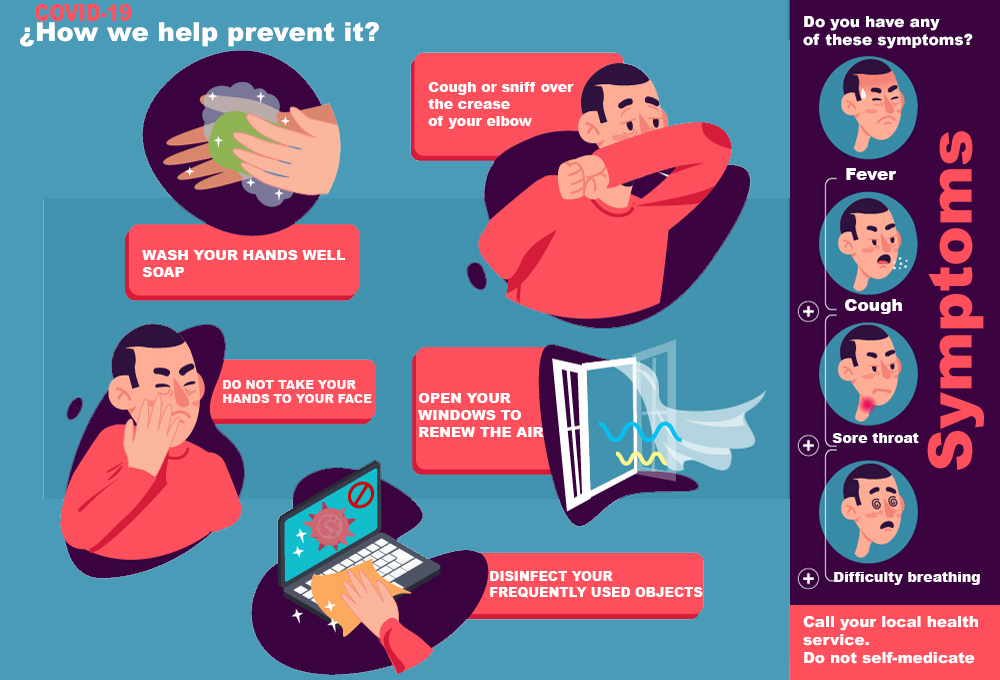
<style>
.page{position:relative;width:1000px;height:680px;background:#4a9bb8}
.page>*{position:absolute;margin:0}
.t1{font:23.1px "Arial-Black";color:#fe4f5c;scale:0.81 1}
.t2{font:15.4px "Arial-Black";color:#ffffff}
.t3{font:26.4px "Arial-Black";color:#ffffff}
.t4{font:14px "Arial-Black";color:#ffffff}
.t5{font:14px "Arial-Black";color:#fe4f5c}
.t6{font:60.1px "Arial-Black";color:#fe4f5c}
.t7{font:17px "Arial-Black";color:#ffffff}
.t8{font:12px "Arial-Black";color:#fcf6f7}
.t9{font:13px "Arial-Black";color:#ffffff}
.t10{font:15.1px "Arial-Black";color:#ffffff}
</style>
<div class="page">
<p class="t1" style="left:35px;top:4px;width:97px;height:17px">COVID-19</p>
<p class="t2" style="left:803px;top:16px;width:170px;height:33px">Do you have any <br>of these symptoms?</p>
<p class="t3" style="left:20px;top:22px;width:359px;height:25px">¿How we help prevent it?</p>
<p class="t4" style="left:428px;top:82px;width:146px;height:47px"><span class="t5"><br></span>Cough or sniff over<br>the crease <br>of your elbow</p>
<p class="t6" style="left:927px;top:131px;width:57px;height:339px;rotate:-90deg">Symptoms</p>
<p class="t7" style="left:846px;top:168px;width:51px;height:12px">Fever</p>
<p class="t4" style="left:142px;top:250px;width:203px;height:27px"><span class="t5"><br></span>WASH YOUR HANDS WELL <br>SOAP</p>
<p class="t7" style="left:845px;top:299px;width:57px;height:15px">Cough</p>
<p class="t8" style="left:223px;top:380px;width:149px;height:23px">DO NOT TAKE YOUR <br>HANDS TO YOUR FACE</p>
<p class="t4" style="left:418px;top:393px;width:126px;height:44px">OPEN YOUR<br>WINDOWS TO <br>RENEW THE AIR</p>
<p class="t4" style="left:832px;top:433px;width:87px;height:10px">Sore throat</p>
<p class="t9" style="left:490px;top:571px;width:213px;height:27px">DISINFECT YOUR <br>FREQUENTLY USED OBJECTS</p>
<p class="t4" style="left:834px;top:572px;width:146px;height:13px">Difficulty breathing</p>
<p class="t10" style="left:803px;top:616px;width:175px;height:48px">Call your local health <br>service.<br>Do not self-medicate</p>
</div>
